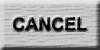
<style>
.page{position:relative;width:100px;height:50px}
.page>*{position:absolute;margin:0}
.t1{font:18px "Arial-BoldMT";color:#000000}
</style>
<div class="page">
<p class="t1" style="left:12px;top:16px;width:75px;height:15px">CANCEL</p>
</div>
